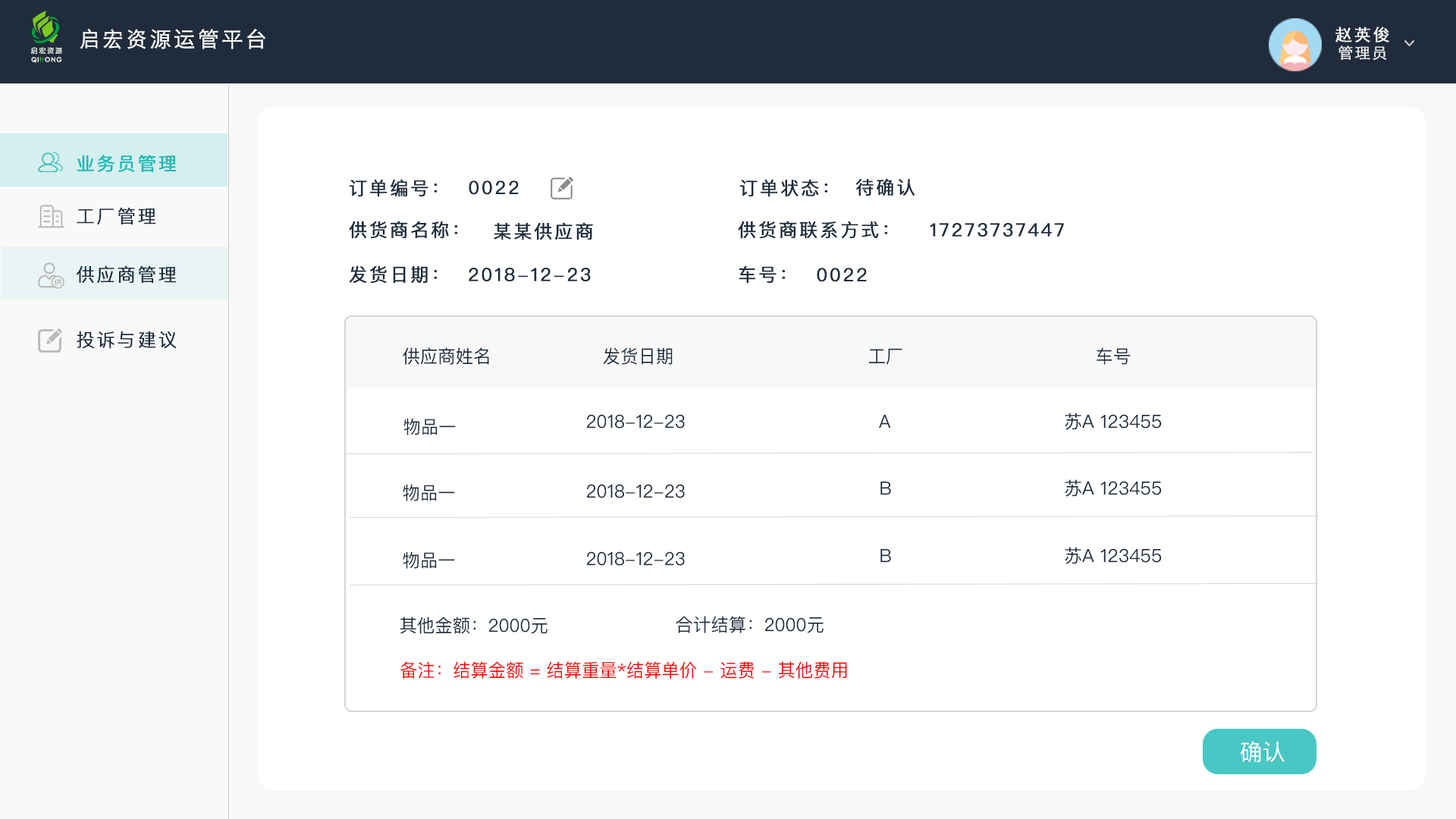
<style>
.page{position:relative;width:1456px;height:819px;background:#ffffff}
.page>*{position:absolute;margin:0}
.t1{font:21.2px "STHeitiSC-Light";letter-spacing:0.1em;color:#ffffff;font-weight:bold}
.t2{font:16.7px "STHeitiSC-Light";letter-spacing:0.1em;color:#ffffff;font-weight:bold}
.t3{font:7px "FZLTZHK--GBK1-0";letter-spacing:0.18em;color:#ffffff}
.t4{font:15.2px "STHeitiSC-Light";letter-spacing:0.1em;color:#ffffff;font-weight:bold}
.t5{font:6.3px "CenturyGothic";letter-spacing:0.1em;color:#ffffff;font-weight:bold}
.t6{font:18.2px "PingFangSC-Regular";letter-spacing:0.1em;color:#1cb9b5;font-weight:bold}
.t7{font:18.2px "PingFangSC-Regular";letter-spacing:0.1em;color:#1e2c3e;font-weight:bold}
.t8{font:18.2px "PingFangSC-Light";letter-spacing:0.1em;color:#1e2c3e;font-weight:bold}
.t9{font:18.2px "PingFangSC-Regular";color:#1e2c3e}
.t10{font:18.2px "PingFangSC-Regular";color:#ff0000}
.t11{font:22.7px "PingFangSC-Regular";color:#ffffff}
</style>
<div class="page">
<p class="t1" style="left:80px;top:29px;width:185px;height:20px">启宏资源运管平台</p>
<p class="t2" style="left:1335px;top:27px;width:54px;height:15px">赵英俊</p>
<p class="t3" style="left:31px;top:47px;width:31px;height:7px">启宏资源</p>
<p class="t4" style="left:1338px;top:45px;width:49px;height:15px;opacity:0.9">管理员</p>
<p class="t5" style="left:31px;top:57px;width:31px;height:6px">QI  ONG</p>
<p class="t6" style="left:77px;top:155px;width:100px;height:17px">业务员管理</p>
<p class="t7" style="left:349px;top:179px;width:89px;height:18px">订单编号：</p>
<p class="t7" style="left:469px;top:180px;width:50px;height:15px">0022</p>
<p class="t7" style="left:739px;top:179px;width:89px;height:18px">订单状态：</p>
<p class="t7" style="left:856px;top:178px;width:59px;height:18px">待确认</p>
<p class="t8" style="left:77px;top:207px;width:79px;height:17px">工厂管理</p>
<p class="t7" style="left:349px;top:221px;width:109px;height:18px">供货商名称：</p>
<p class="t7" style="left:738px;top:221px;width:150px;height:18px">供货商联系方式：</p>
<p class="t7" style="left:494px;top:222px;width:99px;height:18px">某某供应商</p>
<p class="t7" style="left:930px;top:223px;width:134px;height:14px">17273737447</p>
<p class="t8" style="left:77px;top:265px;width:100px;height:18px">供应商管理</p>
<p class="t7" style="left:349px;top:265px;width:89px;height:19px">发货日期：</p>
<p class="t7" style="left:469px;top:268px;width:122px;height:13px">2018-12-23</p>
<p class="t7" style="left:739px;top:265px;width:47px;height:19px">车号：</p>
<p class="t7" style="left:817px;top:268px;width:50px;height:14px">0022</p>
<p class="t8" style="left:77px;top:331px;width:100px;height:18px">投诉与建议</p>
<p class="t9" style="left:403px;top:347px;width:86px;height:18px">供应商姓名</p>
<p class="t9" style="left:603px;top:347px;width:70px;height:18px">发货日期</p>
<p class="t9" style="left:868px;top:348px;width:34px;height:17px">工厂</p>
<p class="t9" style="left:1097px;top:347px;width:34px;height:18px">车号</p>
<p class="t9" style="left:1065px;top:413px;width:97px;height:17px">苏A 123455</p>
<p class="t9" style="left:403px;top:418px;width:53px;height:17px">物品一</p>
<p class="t9" style="left:587px;top:414px;width:98px;height:14px">2018-12-23</p>
<p class="t9" style="left:879px;top:415px;width:12px;height:13px">A</p>
<p class="t9" style="left:403px;top:484px;width:52px;height:17px">物品一</p>
<p class="t9" style="left:587px;top:484px;width:98px;height:14px">2018-12-23</p>
<p class="t9" style="left:880px;top:482px;width:11px;height:13px">B</p>
<p class="t9" style="left:1065px;top:479px;width:97px;height:18px">苏A 123455</p>
<p class="t9" style="left:403px;top:551px;width:52px;height:18px">物品一</p>
<p class="t9" style="left:587px;top:551px;width:98px;height:15px">2018-12-23</p>
<p class="t9" style="left:880px;top:549px;width:11px;height:14px">B</p>
<p class="t9" style="left:1065px;top:547px;width:97px;height:17px">苏A 123455</p>
<p class="t9" style="left:400px;top:617px;width:148px;height:17px">其他金额：2000元</p>
<p class="t9" style="left:676px;top:616px;width:148px;height:17px">合计结算：2000元</p>
<p class="t10" style="left:400px;top:661px;width:447px;height:18px">备注：结算金额 = 结算重量*结算单价 - 运费 - 其他费用</p>
<p class="t11" style="left:1241px;top:741px;width:44px;height:22px">确认</p>
</div>
